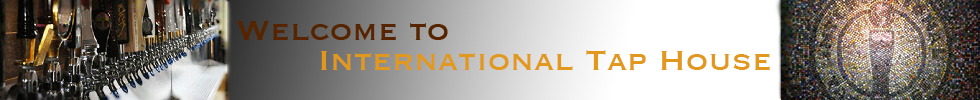
<style>
.page{position:relative;width:980px;height:100px}
.page>*{position:absolute;margin:0}
.t1{font:36px "Copperplate";color:#e2981d}
</style>
<div class="page">
<p class="t1" style="left:321px;top:50px;width:449px;height:20px">International Tap House</p>
</div>
